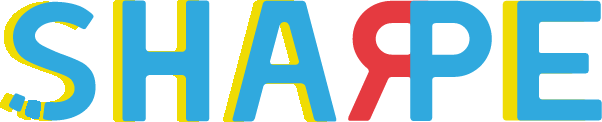
<style>
.page{position:relative;width:602px;height:122px;background:#ffffff}
.page>*{position:absolute;margin:0}
.t1{font:172px "LEIXO-DEMO";color:#30a9de}
.t2{font:170.8px "LEIXO-DEMO";color:#e53a40}
</style>
<div class="page">
<p class="t1" style="left:9px;top:0px;width:328px;height:122px">Sha</p>
<p class="t2" style="left:348px;top:0px;width:84px;height:121px;rotate:180deg">r</p>
<p class="t1" style="left:410px;top:0px;width:192px;height:121px">pe</p>
<p class="t1" style="left:502px;top:0px;width:86px;height:121px">e</p>
</div>
